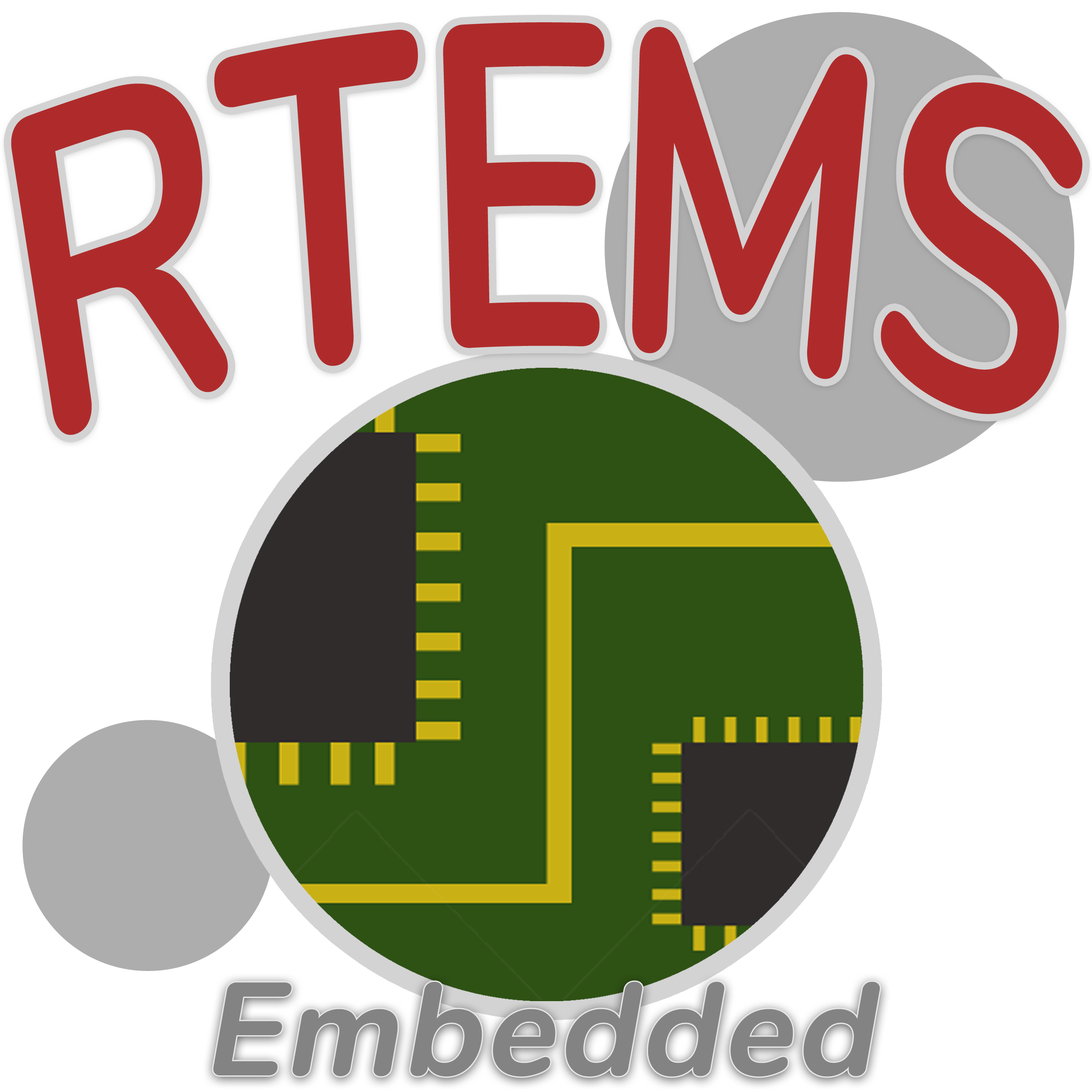
<style>
.page{position:relative;width:1092px;height:1092px;background:#ffffff}
.page>*{position:absolute;margin:0}
.t1{font:454.8px "Nunito-Bold";color:#af2b2b;scale:0.64 1}
.t2{font:130.5px "Nunito-Bold";color:#838383;font-weight:bold;font-style:italic}
</style>
<div class="page">
<p class="t1" style="left:11px;top:22px;width:1071px;height:413px">RTEMS</p>
<p class="t2" style="left:213px;top:981px;width:667px;height:96px">Embedded</p>
</div>
